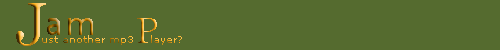
<style>
.page{position:relative;width:500px;height:50px;background:#556b2f}
.page>*{position:absolute;margin:0}
.t1{font:30px "Verdana"}
.t2{font:36px "Georgia"}
.t3{font:10px "Verdana";color:#fbae1b}
.t4{font:10px "Verdana";color:#9a6602}
.t5{font:10px "Verdana";color:#c07f02}
</style>
<div class="page">
<p class="t1" style="left:47px;top:18px;width:13px;height:17px">a</p>
<p class="t1" style="left:68px;top:18px;width:25px;height:17px">m</p>
<p class="t2" style="left:137px;top:18px;width:20px;height:25px">P</p>
<p class="t3" style="left:42px;top:35px;width:140px;height:10px">ust <span class="t4">a</span>nother <span class="t5">m</span>p3    layer?</p>
</div>
